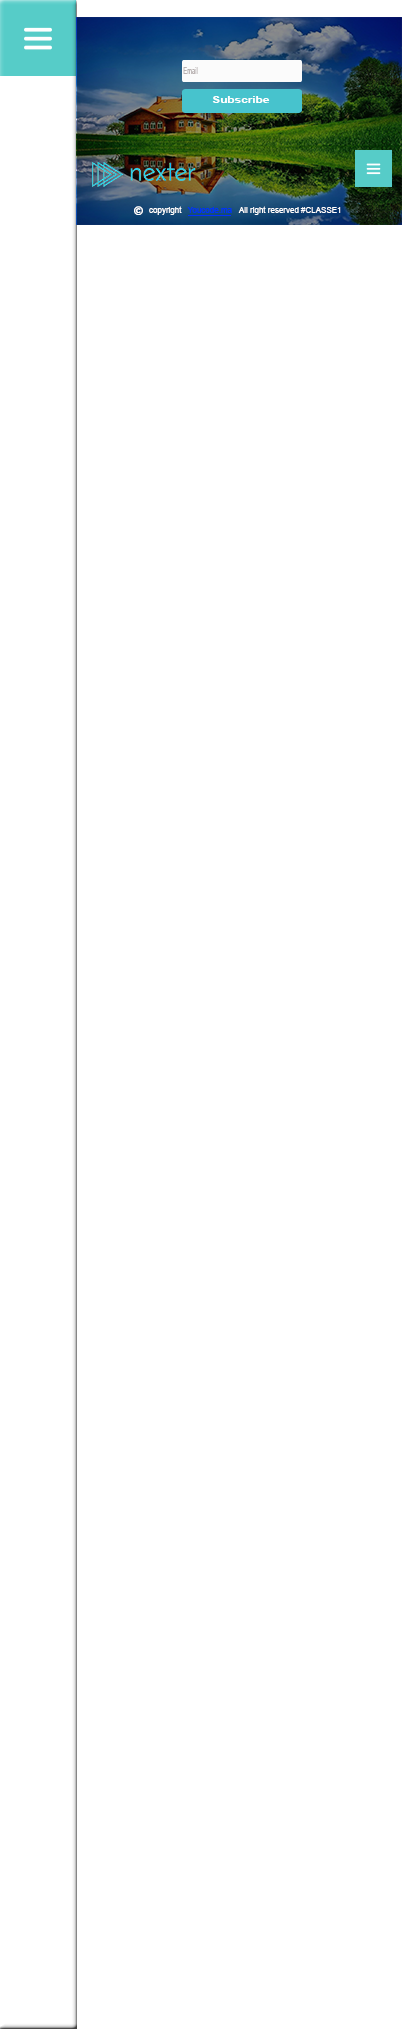
<style>
.page{position:relative;width:402px;height:2029px;background:#ffffff}
.page>*{position:absolute;margin:0}
.t1{font:9.9px "ArialNarrow";color:#b8b1b1;scale:0.71 1}
.t2{font:9.2px "Arial-BoldMT";color:#ffffff;scale:1.28 1}
.t3{font:7.9px "ArialMT";color:#ffffff}
.t4{font:7.9px "ArialMT";color:#0030ff}
</style>
<div class="page">
<p class="t1" style="left:183px;top:67px;width:15px;height:7px">Email</p>
<p class="t2" style="left:212px;top:96px;width:58px;height:7px">Subscribe</p>
<p class="t3" style="left:149px;top:206px;width:33px;height:9px">copyright</p>
<p class="t4" style="left:187px;top:207px;width:45px;height:6px">Youcode.ma</p>
<p class="t3" style="left:238px;top:206px;width:103px;height:9px">All right reserved #CLASSE1</p>
</div>
